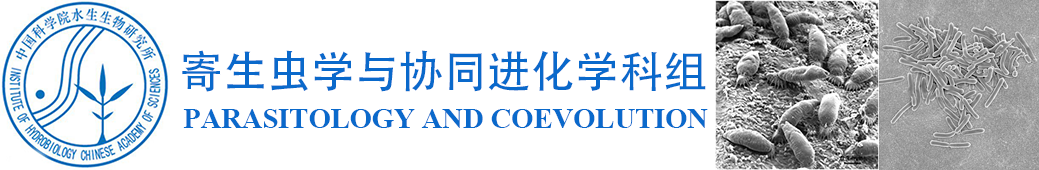
<style>
.page{position:relative;width:1039px;height:170px;background:#ffffff}
.page>*{position:absolute;margin:0}
.t1{font:44px "AdobeHeitiStd-Regular";color:#0a69cb}
.t2{font:28.5px "TimesNewRomanPS-BoldMT";color:#0a69cb}
</style>
<div class="page">
<p class="t1" style="left:182px;top:50px;width:524px;height:42px">寄生虫学与协同进化学科组</p>
<p class="t2" style="left:183px;top:109px;width:525px;height:19px">PARASITOLOGY AND COEVOLUTION</p>
</div>
